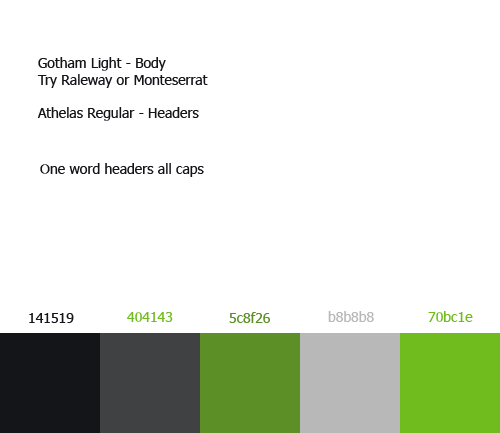
<style>
.page{position:relative;width:500px;height:433px;background:#ffffff}
.page>*{position:absolute;margin:0}
.t1{font:14px "Tahoma";color:#141519}
.t2{font:14px "Tahoma";color:#70bc1e}
.t3{font:14px "Tahoma";color:#5c8f26}
.t4{font:14px "Tahoma";color:#b8b8b8}
</style>
<div class="page">
<p class="t1" style="left:37px;top:57px;width:171px;height:64px">Gotham Light - Body<br>Try Raleway or Monteserrat<br><br>Athelas Regular - Headers</p>
<p class="t1" style="left:40px;top:163px;width:164px;height:14px">One word headers all caps</p>
<p class="t1" style="left:29px;top:313px;width:45px;height:10px">141519</p>
<p class="t2" style="left:127px;top:312px;width:46px;height:10px">404143</p>
<p class="t3" style="left:229px;top:312px;width:41px;height:11px">5c8f26</p>
<p class="t4" style="left:328px;top:311px;width:46px;height:11px">b8b8b8</p>
<p class="t2" style="left:428px;top:311px;width:45px;height:11px">70bc1e</p>
</div>
